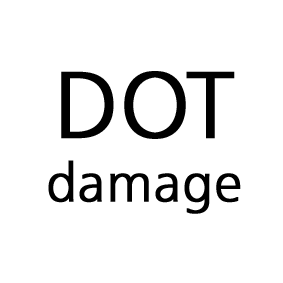
<style>
.page{position:relative;width:283px;height:283px;background:#ffffff}
.page>*{position:absolute;margin:0}
.t1{font:53.3px "FreeSetC";color:#000000;font-weight:bold}
.t2{font:93.3px "FreeSetC";color:#000000;font-weight:bold}
</style>
<div class="page">
<p class="t1" style="left:48px;top:71px;width:193px;height:143px;text-align:center"><span class="t2">DOT<br></span>damage</p>
</div>
